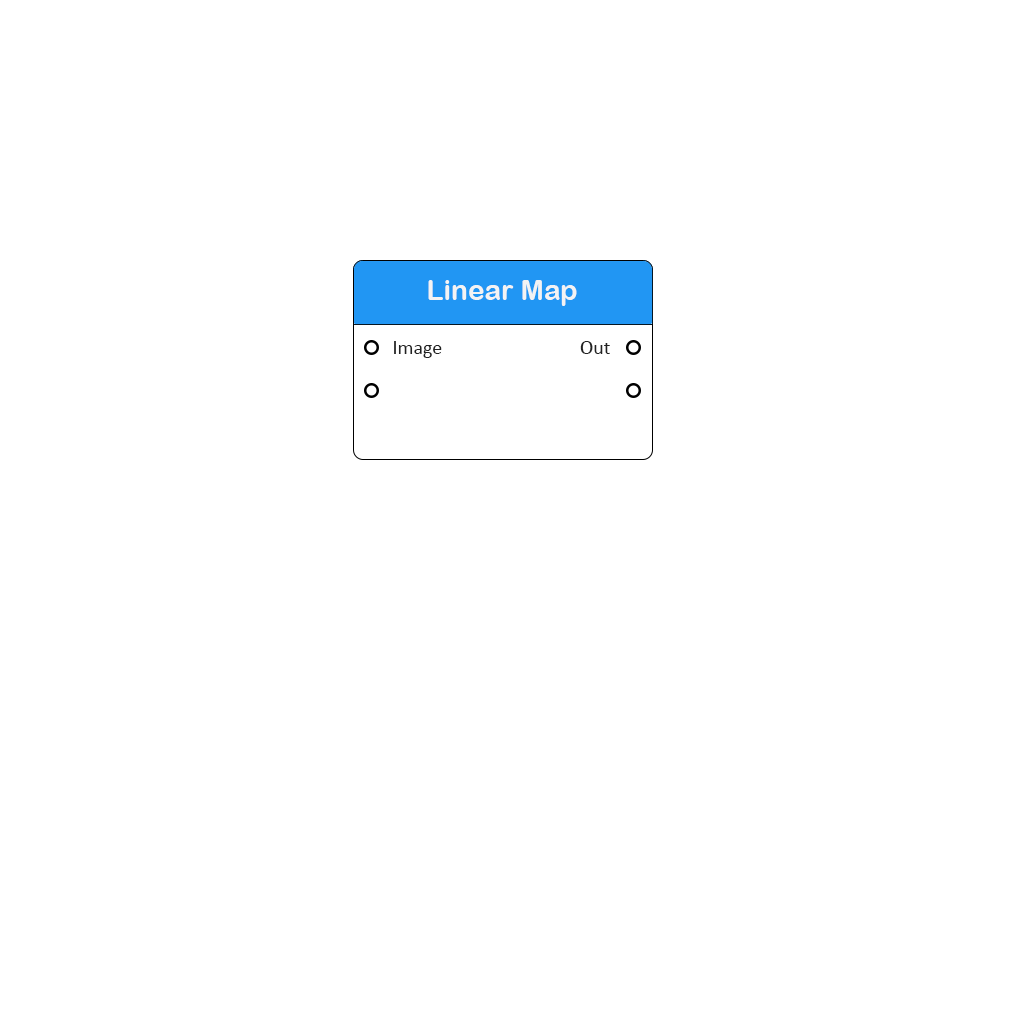
<style>
.page{position:relative;width:1024px;height:1024px;background:#ffffff}
.page>*{position:absolute;margin:0}
.t1{font:28px "ArialRoundedMTBold";color:#f3f3f3}
.t2{font:20px "Calibri";color:#222222}
</style>
<div class="page">
<p class="t1" style="left:428px;top:280px;width:149px;height:26px">Linear Map</p>
<p class="t2" style="left:394px;top:341px;width:48px;height:17px">Image</p>
<p class="t2" style="left:580px;top:341px;width:30px;height:13px">Out</p>
</div>
